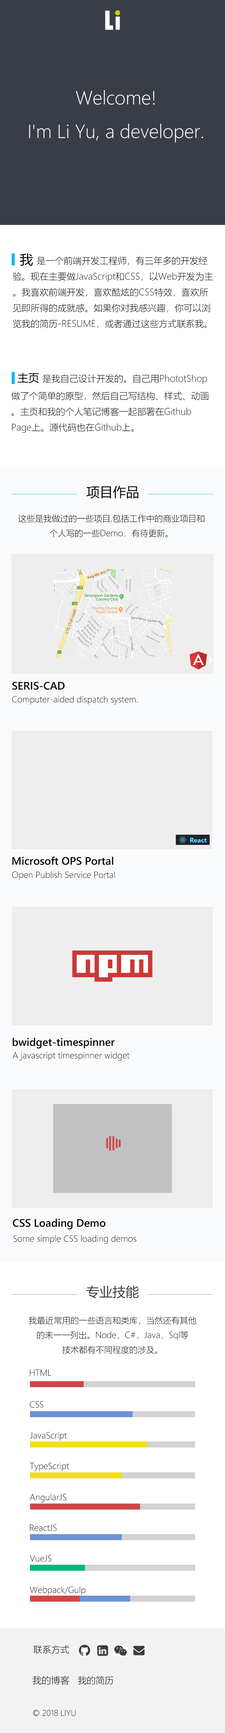
<style>
.page{position:relative;width:225px;height:1733px;background:#ffffff}
.page>*{position:absolute;margin:0}
.t1{font:29.3px "TwCenMT-CondensedExtraBold";color:#ffffff}
.t2{font:30.3px "TwCenMT-CondensedExtraBold";color:#cccc00}
.t3{font:19.2px "SegoeUI-Light";color:#fefefe}
.t4{font:9px "MicrosoftYaHeiLight";color:#000000}
.t5{font:9px "MicrosoftYaHei";color:#000000}
.t6{font:13.2px "MicrosoftYaHei";color:#000000}
.t7{font:10.8px "MicrosoftYaHei";color:#000000}
.t8{font:13.2px "MicrosoftYaHei";color:#010101}
.t9{font:8.4px "MicrosoftYaHeiLight";color:#000000}
.t10{font:10.8px "SegoeUI-Semibold";color:#000000}
.t11{font:9px "SegoeUI-Light";color:#010101}
.t12{font:9px "SegoeUI-Light";color:#000000}
.t13{font:13.2px "MicrosoftYaHei";color:#393e46}
.t14{font:9.3px "MicrosoftYaHeiLight";color:#000000}
.t15{font:7.8px "MicrosoftYaHeiLight";color:#000000}
</style>
<div class="page">
<p class="t1" style="left:105px;top:10px;width:15px;height:20px">Li</p>
<p class="t2" style="left:115px;top:10px;width:5px;height:6px">·</p>
<p class="t3" style="left:29px;top:90px;width:174px;height:52px;text-align:center">Welcome! <br>I'm Li Yu, a developer.</p>
<p class="t4" style="left:13px;top:256px;width:200px;height:72px"><span class="t5">         </span>是一个前端开发工程师，有三年多的开发经验。现在主要做JavaScript和CSS，以Web开发为主。我喜欢前端开发，喜欢酷炫的CSS特效，喜欢所见即所得的成就感。如果你对我感兴趣，你可以浏览我的简历-RESUME，或者通过这些方式联系我。</p>
<p class="t6" style="left:20px;top:253px;width:13px;height:13px">我</p>
<p class="t4" style="left:11px;top:373px;width:198px;height:60px"><span class="t7">  主页 </span>是我自己设计开发的。自己用PhototShop做了个简单的原型，然后自己写结构、样式、动画。主页和我的个人笔记博客一起部署在Github Page上。源代码也在Github上。</p>
<p class="t8" style="left:86px;top:486px;width:52px;height:13px">项目作品</p>
<p class="t9" style="left:18px;top:514px;width:186px;height:24px;text-align:center">这些是我做过的一些项目,包括工作中的商业项目和个人写的一些Demo，有待更新。</p>
<p class="t10" style="left:12px;top:682px;width:53px;height:8px">SERIS-CAD</p>
<p class="t11" style="left:12px;top:696px;width:126px;height:9px">Computer-aided dispatch system.</p>
<p class="t10" style="left:12px;top:856px;width:101px;height:9px">Microsoft OPS Portal</p>
<p class="t12" style="left:12px;top:871px;width:103px;height:9px">Open Publish Service Portal</p>
<p class="t10" style="left:13px;top:1038px;width:102px;height:11px">bwidget-timespinner</p>
<p class="t12" style="left:13px;top:1052px;width:117px;height:9px">A javascript timespinner widget</p>
<p class="t10" style="left:13px;top:1219px;width:93px;height:11px">CSS Loading Demo</p>
<p class="t12" style="left:14px;top:1235px;width:122px;height:9px">Some simple CSS loading demos</p>
<p class="t13" style="left:86px;top:1286px;width:53px;height:13px">专业技能</p>
<p class="t9" style="left:28px;top:1317px;width:168px;height:37px;text-align:center">我最近常用的一些语言和类库，当然还有其他<br>的未一一列出。Node，C#，Java，Sql等<br>技术都有不同程度的涉及。</p>
<p class="t12" style="left:30px;top:1370px;width:21px;height:6px">HTML</p>
<p class="t12" style="left:30px;top:1401px;width:14px;height:7px">CSS</p>
<p class="t12" style="left:30px;top:1432px;width:37px;height:9px">JavaScript</p>
<p class="t12" style="left:30px;top:1463px;width:39px;height:9px">TypeScript</p>
<p class="t12" style="left:30px;top:1494px;width:36px;height:9px">AngularJS</p>
<p class="t12" style="left:30px;top:1525px;width:27px;height:7px">ReactJS</p>
<p class="t12" style="left:30px;top:1555px;width:21px;height:7px">VueJS</p>
<p class="t12" style="left:30px;top:1586px;width:56px;height:9px">Webpack/Gulp</p>
<p class="t4" style="left:33px;top:1646px;width:36px;height:8px">联系方式</p>
<p class="t14" style="left:32px;top:1676px;width:37px;height:9px">我的博客</p>
<p class="t4" style="left:78px;top:1676px;width:35px;height:9px">我的简历</p>
<p class="t15" style="left:33px;top:1710px;width:43px;height:7px">© 2018 LIYU</p>
</div>
